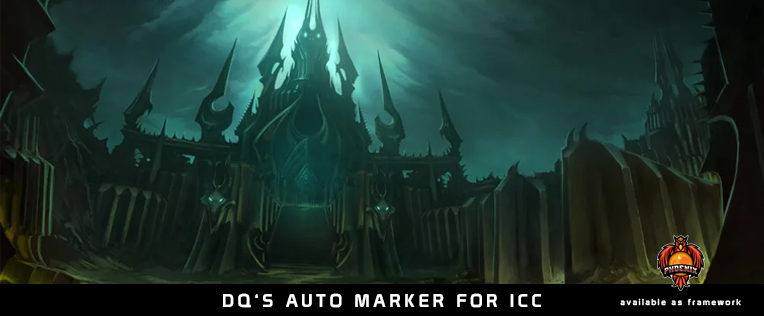
<style>
.page{position:relative;width:764px;height:316px}
.page>*{position:absolute;margin:0}
.t1{font:18px "Prototype";letter-spacing:0.2em;color:#fefefe}
.t2{font:8.3px "Prototype";letter-spacing:0.2em;color:#fefefe}
</style>
<div class="page">
<p class="t1" style="left:223px;top:293px;width:318px;height:15px">DQ‘S AUTO MARKER FOR ICC</p>
<p class="t2" style="left:620px;top:298px;width:121px;height:8px">available as framework</p>
</div>
